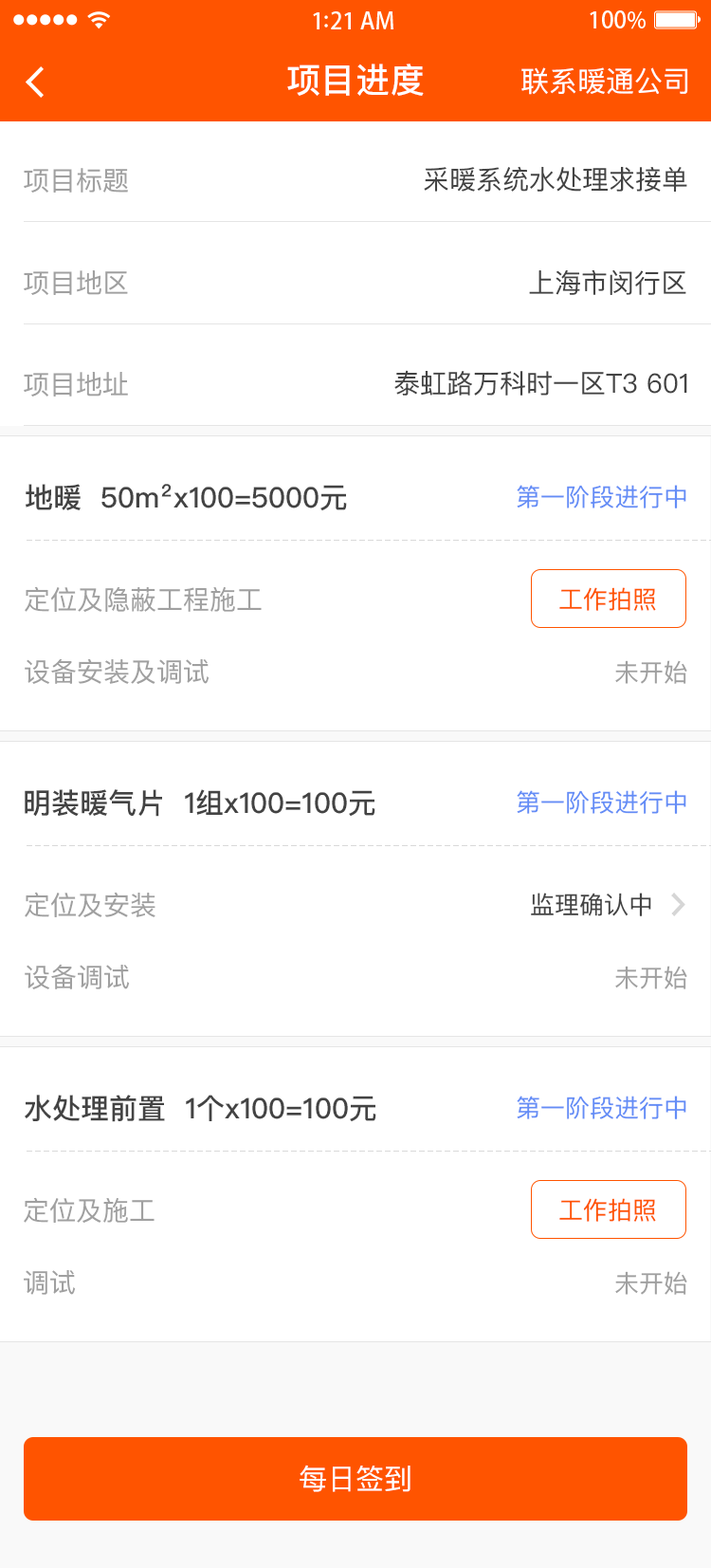
<style>
.page{position:relative;width:711px;height:1568px;background:#ffffff}
.page>*{position:absolute;margin:0}
.t1{font:34.1px "PingFangSC-Medium";letter-spacing:0.02em;color:#ffffff}
.t2{font:28.5px "PingFangSC-Regular";color:#ffffff}
.t3{font:26.6px "PingFangSC-Regular";color:#a0a0a0}
.t4{font:26.6px "PingFangSC-Regular";color:#434343}
.t5{font:28.5px "PingFangSC-Medium";color:#434343}
.t6{font:24.7px "PingFangSC-Regular";color:#648df6}
.t7{font:24.7px "PingFangSC-Regular";color:#ff5400}
.t8{font:24.7px "PingFangSC-Regular";color:#a0a0a0}
.t9{font:24.7px "PingFangSC-Regular";color:#434343}
.t10{font:28.5px "PingFangSC-Regular";color:#ffffff;text-transform:uppercase}
</style>
<div class="page">
<p class="t1" style="left:287px;top:64px;width:137px;height:32px">项目进度</p>
<p class="t2" style="left:522px;top:67px;width:167px;height:28px">联系暖通公司</p>
<p class="t3" style="left:24px;top:168px;width:104px;height:25px">项目标题</p>
<p class="t4" style="left:424px;top:166px;width:264px;height:26px">采暖系统水处理求接单</p>
<p class="t4" style="left:529px;top:269px;width:158px;height:26px">上海市闵行区</p>
<p class="t3" style="left:24px;top:270px;width:104px;height:25px">项目地区</p>
<p class="t3" style="left:24px;top:372px;width:104px;height:25px">项目地址</p>
<p class="t4" style="left:395px;top:370px;width:293px;height:26px">泰虹路万科时一区T3 601</p>
<p class="t5" style="left:26px;top:484px;width:321px;height:27px">地暖  50m²x100=5000元</p>
<p class="t6" style="left:517px;top:485px;width:170px;height:23px">第一阶段进行中</p>
<p class="t3" style="left:25px;top:586px;width:237px;height:26px">定位及隐蔽工程施工</p>
<p class="t7" style="left:560px;top:587px;width:96px;height:24px">工作拍照</p>
<p class="t3" style="left:25px;top:658px;width:185px;height:26px">设备安装及调试</p>
<p class="t8" style="left:616px;top:660px;width:72px;height:24px">未开始</p>
<p class="t5" style="left:25px;top:789px;width:351px;height:28px">明装暖气片  1组x100=100元</p>
<p class="t6" style="left:517px;top:790px;width:170px;height:24px">第一阶段进行中</p>
<p class="t3" style="left:25px;top:892px;width:131px;height:25px">定位及安装</p>
<p class="t9" style="left:531px;top:893px;width:121px;height:23px">监理确认中</p>
<p class="t3" style="left:25px;top:964px;width:105px;height:25px">设备调试</p>
<p class="t8" style="left:616px;top:966px;width:72px;height:23px">未开始</p>
<p class="t5" style="left:25px;top:1095px;width:352px;height:27px">水处理前置  1个x100=100元</p>
<p class="t6" style="left:517px;top:1096px;width:170px;height:23px">第一阶段进行中</p>
<p class="t3" style="left:24px;top:1197px;width:131px;height:26px">定位及施工</p>
<p class="t7" style="left:560px;top:1198px;width:96px;height:24px">工作拍照</p>
<p class="t3" style="left:24px;top:1269px;width:52px;height:26px">调试</p>
<p class="t8" style="left:616px;top:1271px;width:72px;height:24px">未开始</p>
<p class="t10" style="left:300px;top:1465px;width:111px;height:27px">每日签到</p>
</div>
